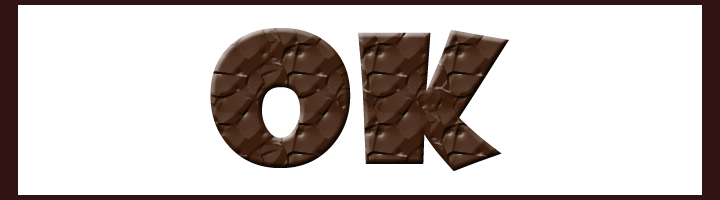
<style>
.page{position:relative;width:720px;height:200px;background:#ffffff}
.page>*{position:absolute;margin:0}
.t1{font:175.2px "ShowcardGothic-Reg";color:#3f200f;scale:1.21 1}
</style>
<div class="page">
<p class="t1" style="left:210px;top:27px;width:299px;height:144px">ok</p>
</div>
